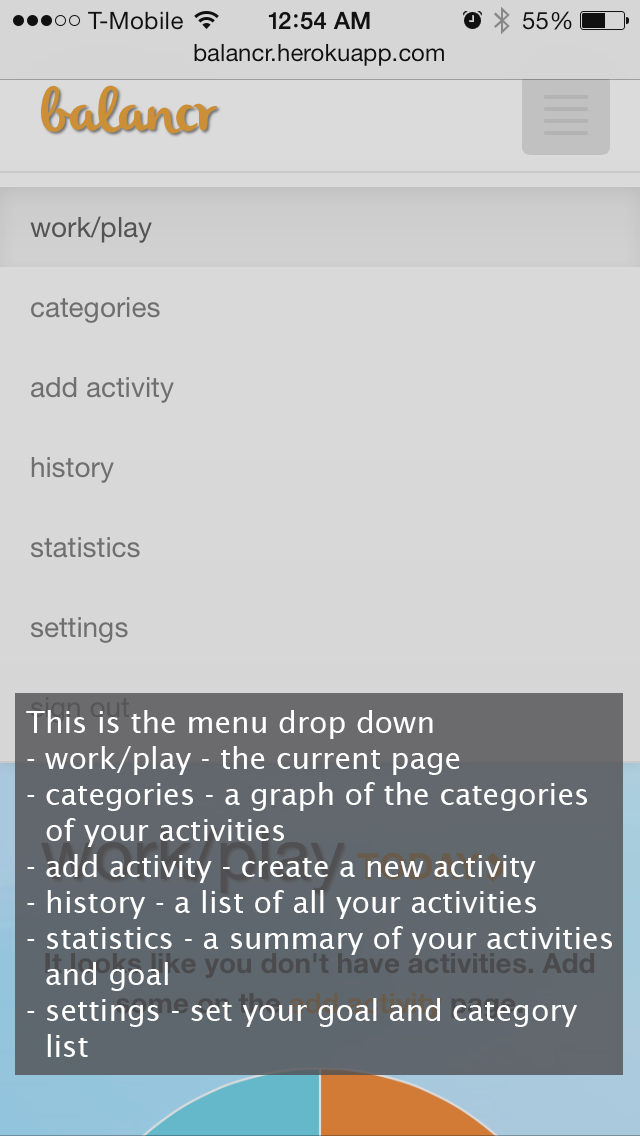
<style>
.page{position:relative;width:640px;height:1136px}
.page>*{position:absolute;margin:0}
.t1{font:30px "LucidaSans";color:#ffffff}
</style>
<div class="page">
<p class="t1" style="left:26px;top:710px;width:586px;height:347px">This is the menu drop down<br>- work/play - the current page<br>- categories - a graph of the categories <br>  of your activities<br>- add activity - create a new activity<br>- history - a list of all your activities<br>- statistics - a summary of your activities<br>  and goal<br>- settings - set your goal and category<br>  list</p>
</div>
